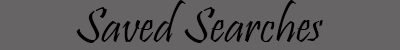
<style>
.page{position:relative;width:400px;height:50px;background:#666464}
.page>*{position:absolute;margin:0}
.t1{font:12px "Pristina-Regular";color:#000000}
</style>
<div class="page">
<p class="t1" style="left:76px;top:0px;width:247px;height:43px">Saved Searches</p>
</div>
